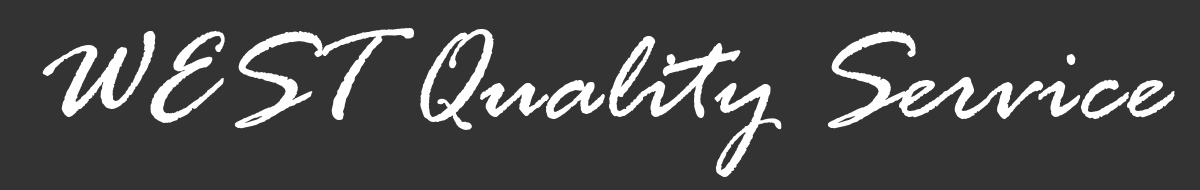
<style>
.page{position:relative;width:1200px;height:190px;background:#333333}
.page>*{position:absolute;margin:0}
.t1{font:135px "RageItalic";color:#ffffff}
</style>
<div class="page">
<p class="t1" style="left:42px;top:28px;width:1133px;height:149px">WEST Quality Service</p>
</div>
